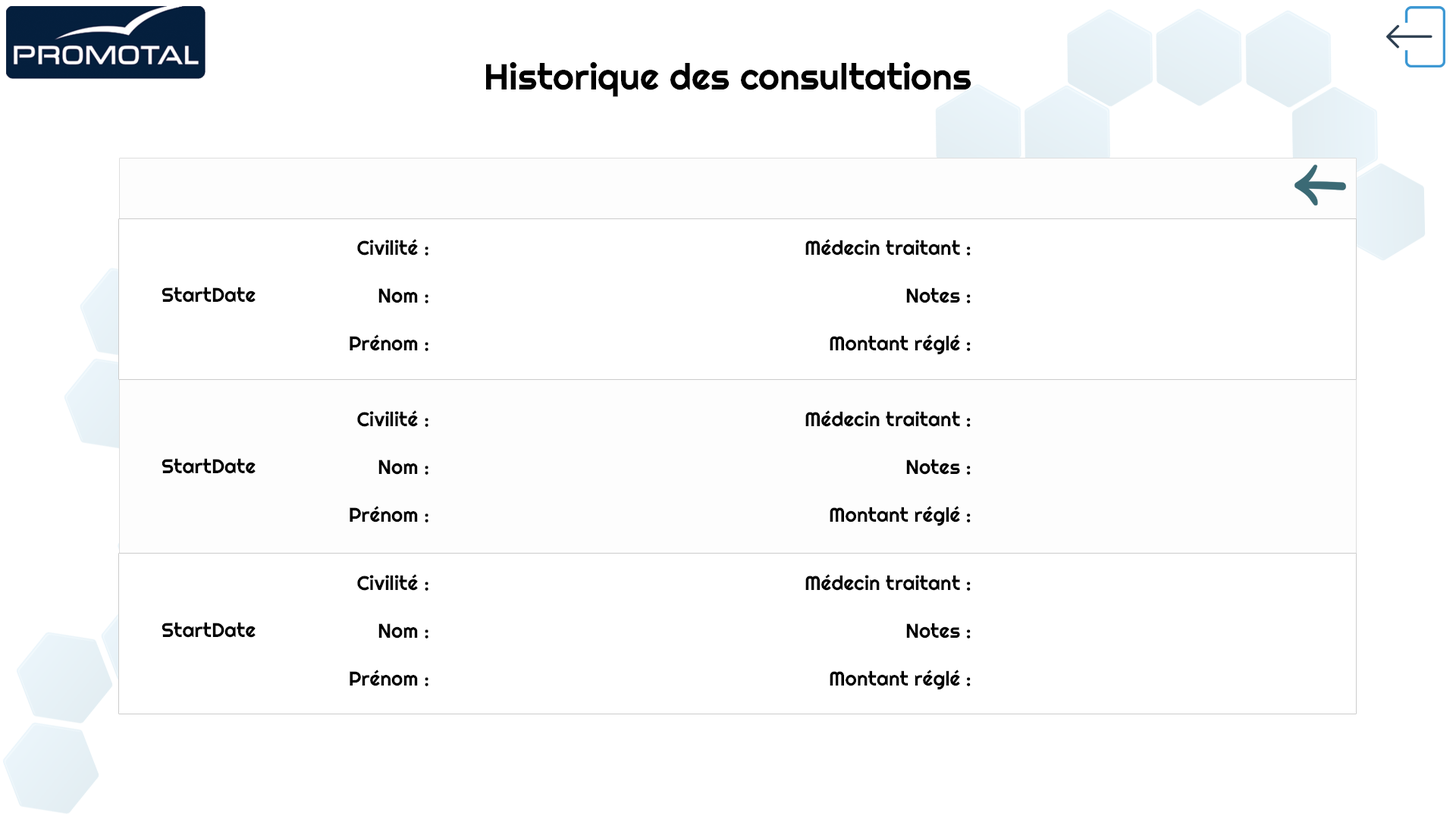
<style>
.page{position:relative;width:1456px;height:819px;background:#ffffff}
.page>*{position:absolute;margin:0}
.t1{font:36.4px "Righteous-Regular";color:#000000}
.t2{font:20px "Righteous-Regular";color:#000000}
</style>
<div class="page">
<p class="t1" style="left:486px;top:61px;width:485px;height:36px">Historique des consultations</p>
<p class="t2" style="left:350px;top:239px;width:78px;height:112px;text-align:right">Civilité :<br><br>Nom :<br><br>Prénom :</p>
<p class="t2" style="left:805px;top:239px;width:166px;height:116px;text-align:right">Médecin traitant :<br><br>Notes :<br><br>Montant réglé :</p>
<p class="t2" style="left:162px;top:287px;width:94px;height:16px">StartDate</p>
<p class="t2" style="left:350px;top:410px;width:78px;height:112px;text-align:right">Civilité :<br><br>Nom :<br><br>Prénom :</p>
<p class="t2" style="left:805px;top:410px;width:166px;height:116px;text-align:right">Médecin traitant :<br><br>Notes :<br><br>Montant réglé :</p>
<p class="t2" style="left:162px;top:458px;width:94px;height:16px">StartDate</p>
<p class="t2" style="left:350px;top:574px;width:78px;height:112px;text-align:right">Civilité :<br><br>Nom :<br><br>Prénom :</p>
<p class="t2" style="left:805px;top:574px;width:166px;height:116px;text-align:right">Médecin traitant :<br><br>Notes :<br><br>Montant réglé :</p>
<p class="t2" style="left:162px;top:622px;width:94px;height:16px">StartDate</p>
</div>
